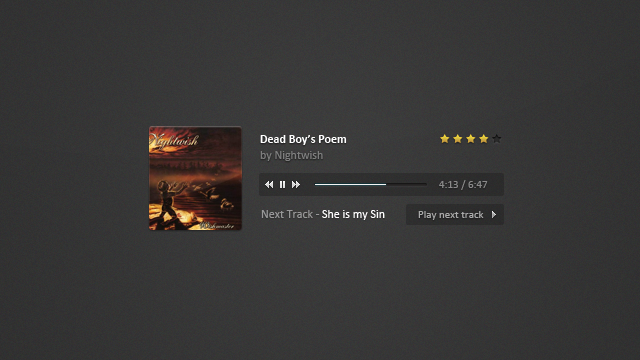
<style>
.page{position:relative;width:640px;height:360px}
.page>*{position:absolute;margin:0}
.t1{font:12px "Calibri-Bold";color:#ffffff}
.t2{font:12px "Calibri";color:#7e7e7e}
.t3{font:11px "Calibri";color:#8a8a8a}
.t4{font:12px "Calibri";color:#ffffff}
.t5{font:12px "Calibri";color:#989898}
.t6{font:11px "Calibri";color:#aaaaaa}
</style>
<div class="page">
<p class="t1" style="left:260px;top:135px;width:87px;height:10px">Dead Boy’s Poem</p>
<p class="t2" style="left:260px;top:151px;width:63px;height:10px">by Nightwish</p>
<p class="t3" style="left:439px;top:180px;width:49px;height:10px">4:13 / 6:47</p>
<p class="t4" style="left:261px;top:210px;width:124px;height:10px"><span class="t5">Next Track - </span>She is my Sin</p>
<p class="t6" style="left:418px;top:211px;width:66px;height:9px">Play next track</p>
</div>
